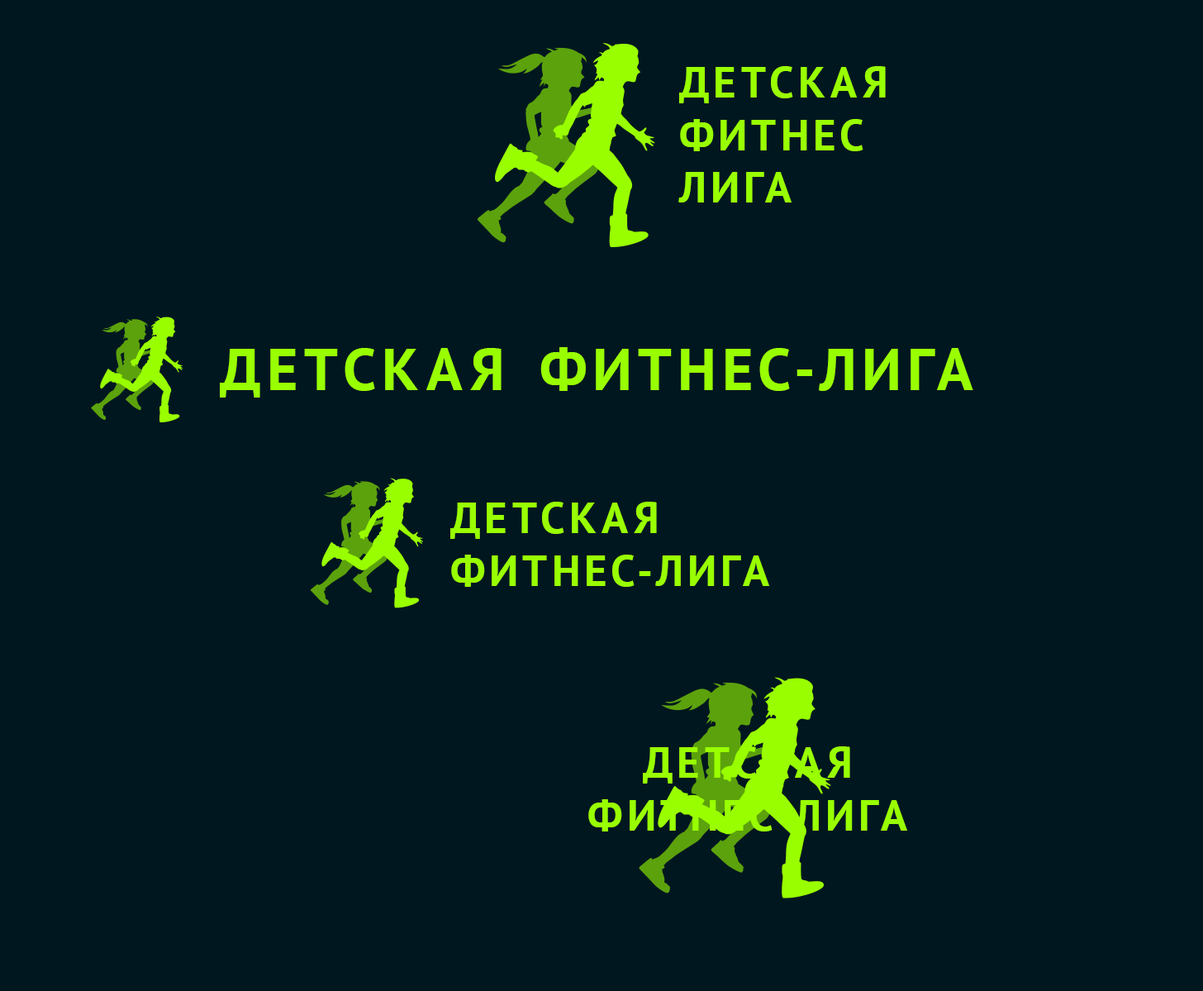
<style>
.page{position:relative;width:1203px;height:991px;background:#00171f}
.page>*{position:absolute;margin:0}
.t1{font:43.6px "PTSans-Bold";letter-spacing:0.1em;color:#99ff00;text-transform:uppercase}
.t2{font:59.3px "PTSans-Bold";letter-spacing:0.1em;color:#99ff00;text-transform:uppercase}
.t3{font:43.7px "PTSans-Bold";letter-spacing:0.1em;color:#99ff00;text-transform:uppercase}
</style>
<div class="page">
<p class="t1" style="left:679px;top:66px;width:207px;height:136px">детская<br>фитнес<br>лига</p>
<p class="t2" style="left:220px;top:347px;width:754px;height:51px">детская фитнес-лига</p>
<p class="t3" style="left:450px;top:502px;width:320px;height:85px">детская<br>фитнес-лига</p>
<p class="t3" style="left:588px;top:746px;width:320px;height:85px;text-align:center">детская<br>фитнес-лига</p>
</div>
